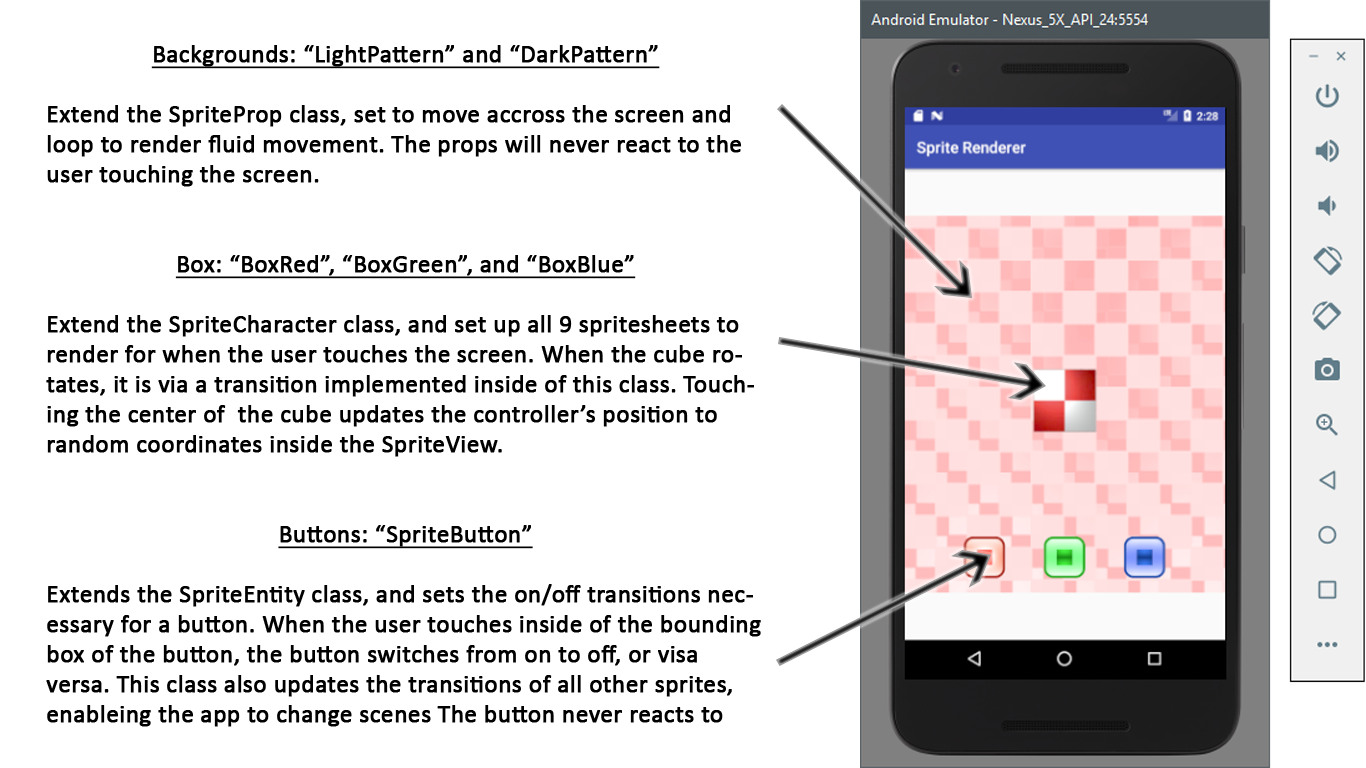
<style>
.page{position:relative;width:1366px;height:768px;background:#ffffff}
.page>*{position:absolute;margin:0}
.t1{font:25px/30px "Calibri";color:#000000;font-weight:bold}
.t2{font:25px/30px "Calibri";color:#000000;font-weight:bold;text-decoration:underline}
</style>
<div class="page">
<p class="t1" style="left:46px;top:45px;width:715px;height:682px;text-align:center"><span class="t2">Backgrounds: “LightPattern” and “DarkPattern”</span><br> <br>Extend the SpriteProp class, set to move accross the screen and loop to render fluid movement. The props will never react to the user touching the screen.<br><br><br><span class="t2">Box: “BoxRed”, “BoxGreen”, and “BoxBlue”</span><br><br>Extend the SpriteCharacter class, and set up all 9 spritesheets to render for when the user touches the screen. When the cube rotates, it is via a transition implemented inside of this class. Touching the center of  the cube updates the controller’s position to random coordinates inside the SpriteView.<br><br><br><span class="t2">Buttons: “SpriteButton”</span><br><br>Extends the SpriteEntity class, and sets the on/off transitions necessary for a button. When the user touches inside of the bounding box of the button, the button switches from on to off, or visa versa. This class also updates the transitions of all other sprites, enableing the app to change scenes The button never reacts to the user touching a place outside of the bounding box.</p>
</div>
